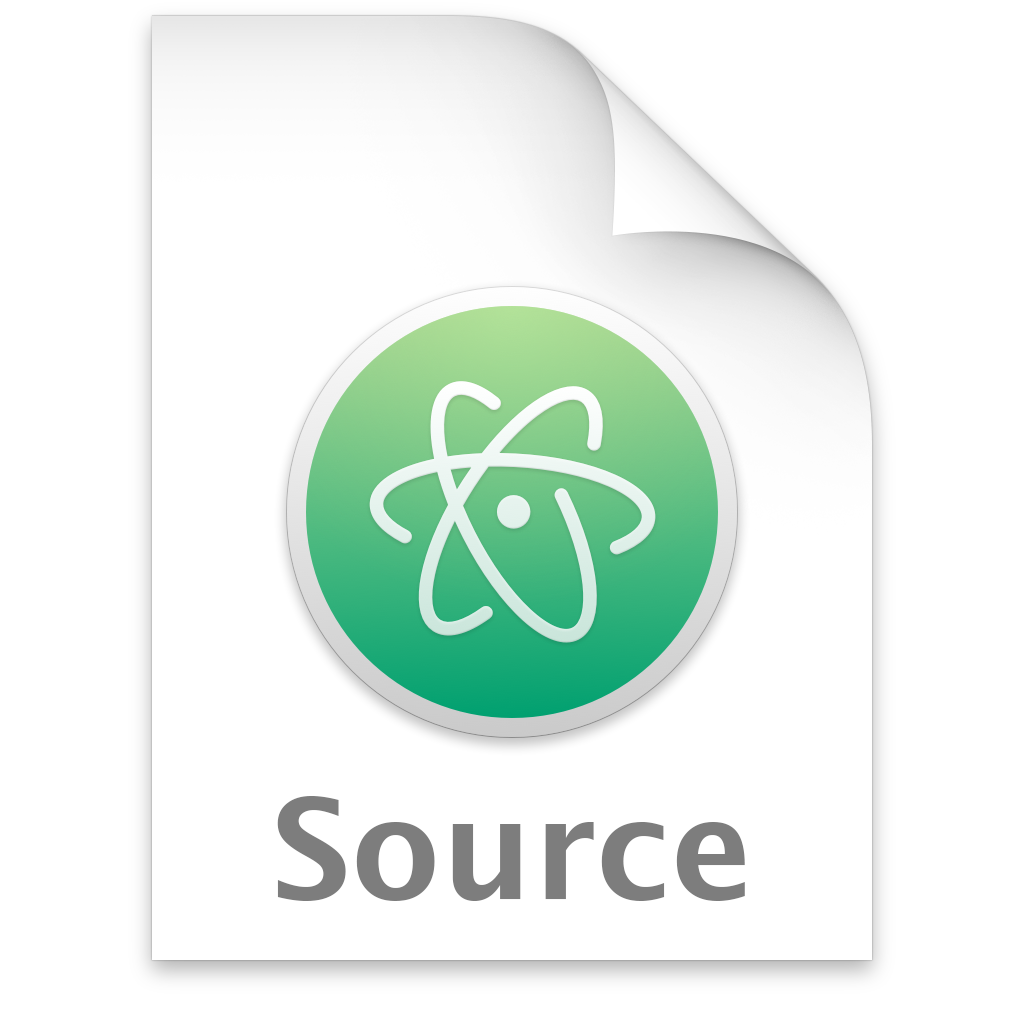
<style>
.page{position:relative;width:1024px;height:1024px;background:#ffffff}
.page>*{position:absolute;margin:0}
.t1{font:140px "LucidaGrande-Bold";color:#7d7d7d}
</style>
<div class="page">
<p class="t1" style="left:277px;top:796px;width:468px;height:105px">Source</p>
</div>
